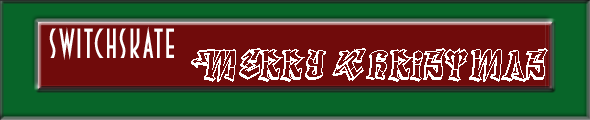
<style>
.page{position:relative;width:590px;height:120px;background:#700b0b}
.page>*{position:absolute;margin:0}
.t1{font:42px "DecoTechTL";letter-spacing:0.05em;color:#ffffff;scale:0.83 1}
.t2{font:36px "Degrassi";letter-spacing:0.05em;color:#ffffff;scale:0.83 1}
</style>
<div class="page">
<p class="t1" style="left:49px;top:26px;width:125px;height:34px">SwitchSkate</p>
<p class="t2" style="left:191px;top:48px;width:357px;height:34px">Merry Christmas</p>
</div>
